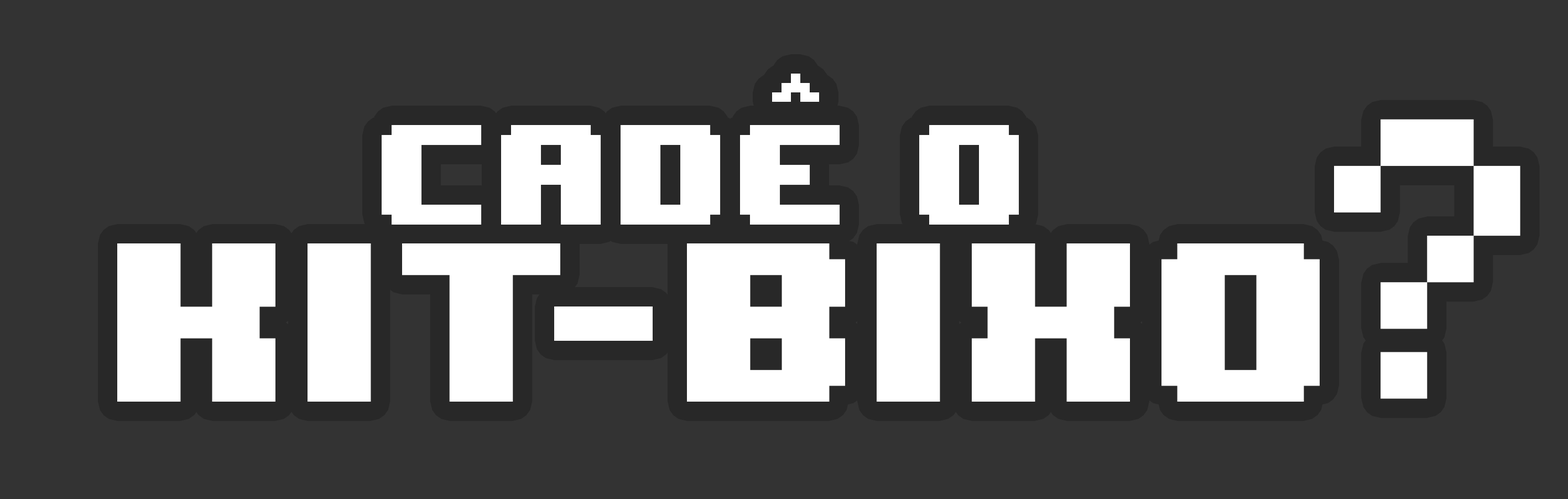
<style>
.page{position:relative;width:1568px;height:499px;background:#333333}
.page>*{position:absolute;margin:0}
.t1{font:119.5px "8BITWONDERNominal";color:#ffffff}
.t2{font:372px "Minecraft";color:#ffffff}
.t3{font:189.8px "8BITWONDERNominal";color:#ffffff}
</style>
<div class="page">
<p class="t1" style="left:382px;top:125px;width:637px;height:100px">cade o</p>
<p class="t2" style="left:1334px;top:119px;width:186px;height:280px">?</p>
<p class="t3" style="left:117px;top:243px;width:1203px;height:159px">kit bixo</p>
</div>
